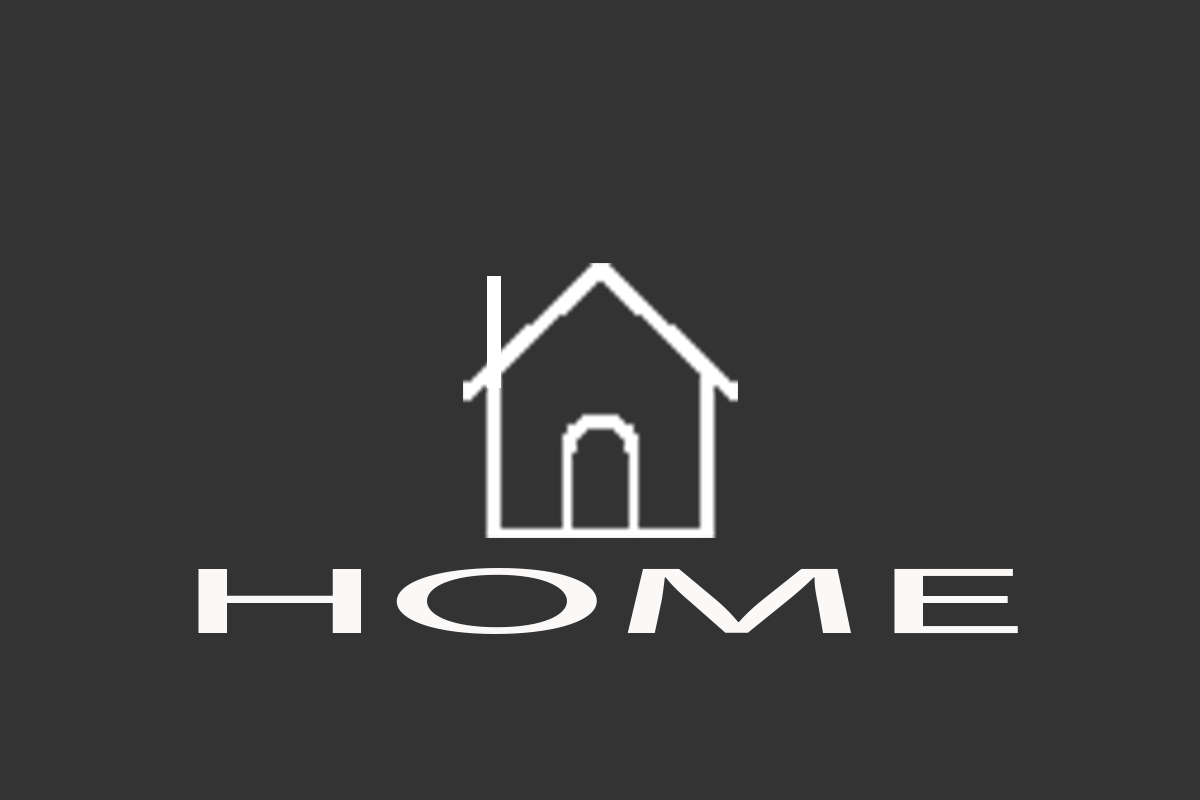
<style>
.page{position:relative;width:1200px;height:800px;background:#333333}
.page>*{position:absolute;margin:0}
.t1{font:95.5px "MyriadHebrew-Regular";color:#fbf8f8;scale:3.4 1}
</style>
<div class="page">
<p class="t1" style="left:198px;top:568px;width:820px;height:66px">HOME</p>
</div>
